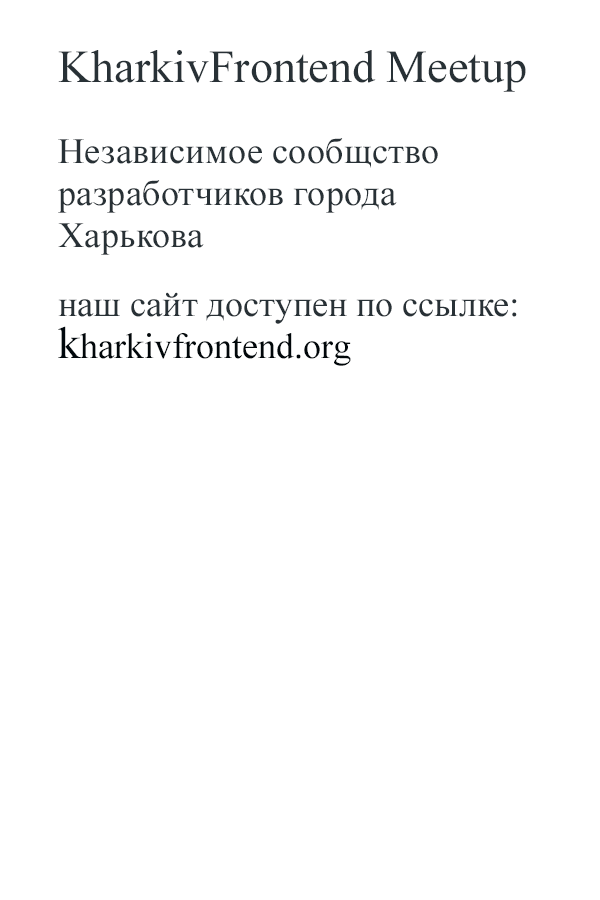
<style>
.page{position:relative;width:600px;height:900px;background:#ffffff}
.page>*{position:absolute;margin:0}
.t1{font:46px "TimesNewRomanPSMT";color:#283136}
.t2{font:36px/42px "TimesNewRomanPSMT";color:#283136}
.t3{font:45px/42px "TimesNewRomanPSMT";color:#01080d}
.t4{font:36px/42px "TimesNewRomanPSMT";color:#01070a}
</style>
<div class="page">
<p class="t1" style="left:58px;top:50px;width:468px;height:42px">KharkivFrontend Meetup</p>
<p class="t2" style="left:58px;top:138px;width:380px;height:117px">Независимое сообщство разработчиков города Харькова</p>
<p class="t2" style="left:58px;top:292px;width:459px;height:74px">наш сайт доступен по ссылке:<br><span class="t3">k</span><span class="t4">harkivfrontend.org</span></p>
</div>
